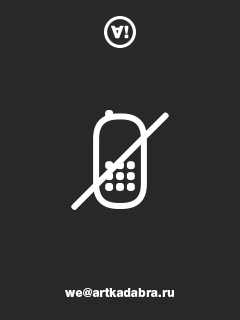
<style>
.page{position:relative;width:240px;height:320px;background:#282828}
.page>*{position:absolute;margin:0}
.t1{font:12px "HelveticaNeueCyr-Heavy";color:#ffffff}
</style>
<div class="page">
<p class="t1" style="left:65px;top:288px;width:109px;height:9px">we@artkadabra.ru</p>
</div>
